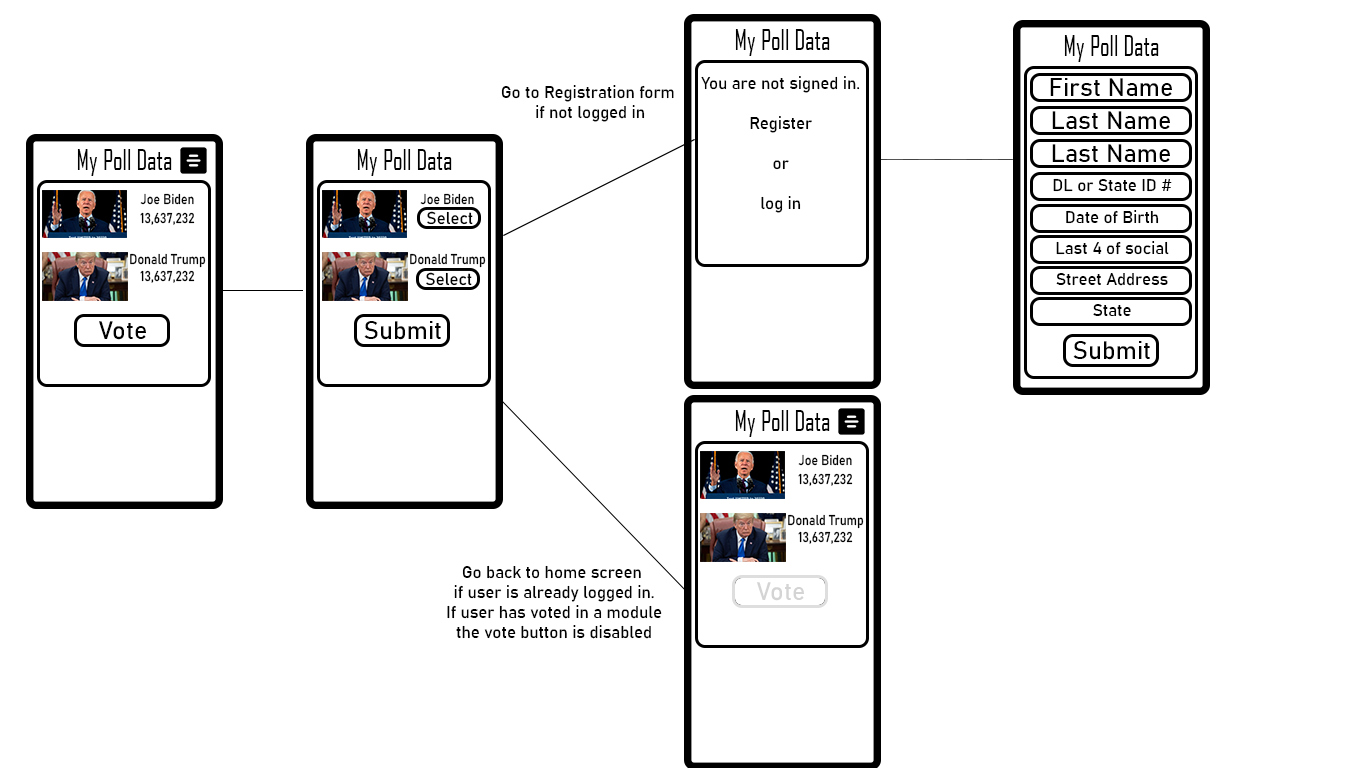
<style>
.page{position:relative;width:1366px;height:768px;background:#ffffff}
.page>*{position:absolute;margin:0}
.t1{font:28.1px "AgencyFB-Reg";color:#010101;scale:0.89 1}
.t2{font:16.7px "Bahnschrift";color:#010101}
.t3{font:25px "Bahnschrift";color:#010101}
.t4{font:13.9px "Bahnschrift";color:#010101;scale:0.89 1}
.t5{font:16.9px "Bahnschrift";color:#010101}
.t6{font:25px "Bahnschrift";color:#d4d4d4}
</style>
<div class="page">
<p class="t1" style="left:735px;top:29px;width:95px;height:27px">My Poll Data</p>
<p class="t1" style="left:1064px;top:35px;width:95px;height:27px">My Poll Data</p>
<p class="t2" style="left:701px;top:76px;width:159px;height:137px;text-align:center">You are not signed in.<br><br>Register<br><br>or<br><br>log in</p>
<p class="t3" style="left:1050px;top:78px;width:122px;height:18px">First Name</p>
<p class="t2" style="left:501px;top:85px;width:173px;height:37px;text-align:center">Go to Registration form <br>if not logged in</p>
<p class="t3" style="left:1052px;top:111px;width:118px;height:18px">Last Name</p>
<p class="t1" style="left:77px;top:149px;width:95px;height:27px">My Poll Data</p>
<p class="t1" style="left:357px;top:149px;width:95px;height:27px">My Poll Data</p>
<p class="t3" style="left:1052px;top:144px;width:118px;height:18px">Last Name</p>
<p class="t2" style="left:1053px;top:178px;width:119px;height:14px">DL or State ID #</p>
<p class="t4" style="left:140px;top:193px;width:54px;height:12px">Joe Biden</p>
<p class="t4" style="left:420px;top:193px;width:54px;height:12px">Joe Biden</p>
<p class="t4" style="left:140px;top:212px;width:55px;height:13px">13,637,232</p>
<p class="t5" style="left:427px;top:211px;width:46px;height:14px">Select</p>
<p class="t2" style="left:1066px;top:210px;width:93px;height:14px">Date of Birth</p>
<p class="t2" style="left:1056px;top:241px;width:113px;height:14px">Last 4 of social</p>
<p class="t4" style="left:130px;top:253px;width:76px;height:15px">Donald Trump</p>
<p class="t4" style="left:410px;top:253px;width:76px;height:15px">Donald Trump</p>
<p class="t4" style="left:140px;top:270px;width:55px;height:13px">13,637,232</p>
<p class="t5" style="left:426px;top:272px;width:46px;height:14px">Select</p>
<p class="t2" style="left:1056px;top:273px;width:112px;height:13px">Street Address</p>
<p class="t2" style="left:1093px;top:304px;width:38px;height:12px">State</p>
<p class="t3" style="left:99px;top:321px;width:47px;height:19px">Vote</p>
<p class="t3" style="left:364px;top:321px;width:77px;height:19px">Submit</p>
<p class="t3" style="left:1073px;top:341px;width:77px;height:19px">Submit</p>
<p class="t1" style="left:735px;top:410px;width:95px;height:27px">My Poll Data</p>
<p class="t4" style="left:798px;top:454px;width:54px;height:12px">Joe Biden</p>
<p class="t4" style="left:798px;top:473px;width:55px;height:13px">13,637,232</p>
<p class="t4" style="left:788px;top:514px;width:76px;height:15px">Donald Trump</p>
<p class="t4" style="left:798px;top:531px;width:55px;height:13px">13,637,232</p>
<p class="t2" style="left:447px;top:565px;width:215px;height:74px;text-align:center">Go back to home screen <br>if user is already logged in.<br>If user has voted in a module<br>the vote button is disabled</p>
<p class="t6" style="left:757px;top:582px;width:47px;height:19px">Vote</p>
</div>
